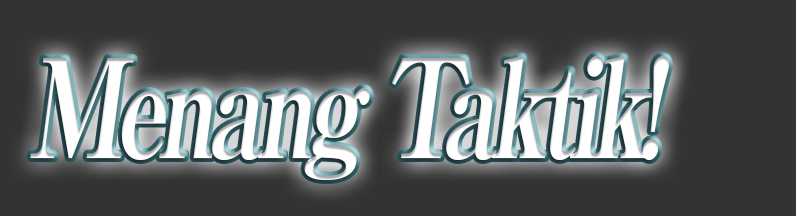
<style>
.page{position:relative;width:796px;height:216px;background:#333333}
.page>*{position:absolute;margin:0}
.t1{font:136.8px "RyuminPro-ExBold";letter-spacing:-0.08em;color:#ffffff;font-style:italic;scale:0.75 1}
</style>
<div class="page">
<p class="t1" style="left:30px;top:55px;width:640px;height:125px">Menang Taktik!</p>
</div>
